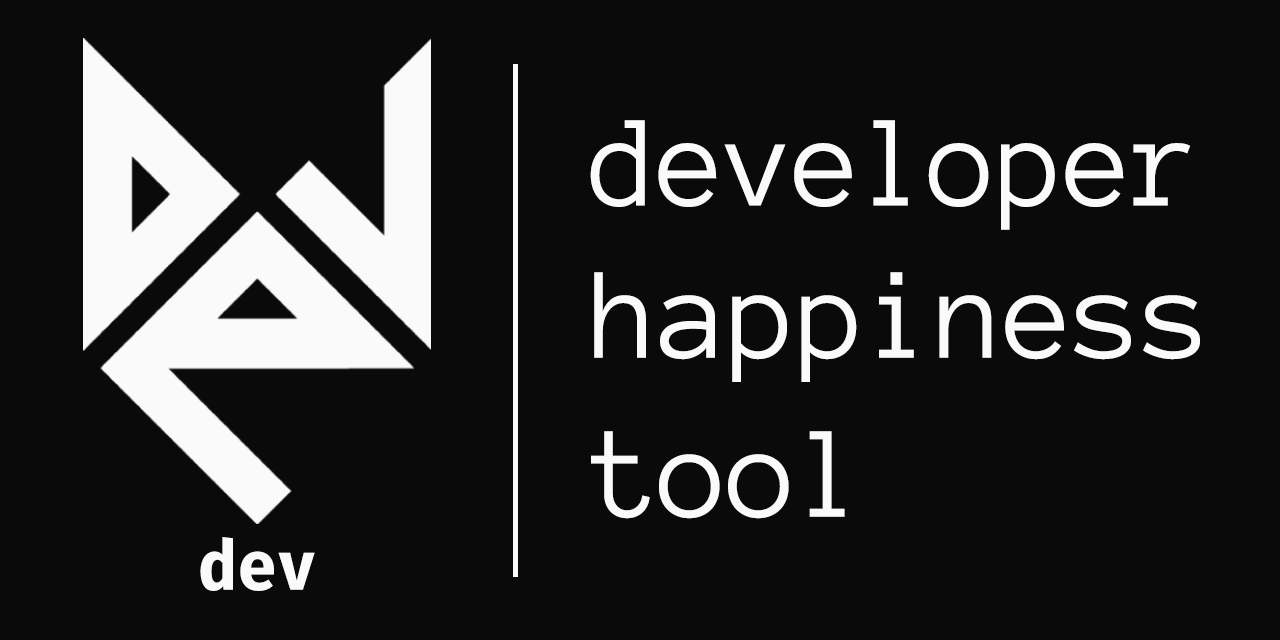
<style>
.page{position:relative;width:1280px;height:640px;background:#0a0a0a}
.page>*{position:absolute;margin:0}
.t1{font:133.4px "AnonymousPro";color:#fafafa;scale:0.93 1}
.t2{font:133.5px "AnonymousPro";color:#fafafa;scale:0.95 1}
.t3{font:69.1px "FiraCode-Bold";color:#fafafa;scale:0.95 1}
</style>
<div class="page">
<p class="t1" style="left:590px;top:120px;width:600px;height:110px">developer</p>
<p class="t2" style="left:594px;top:272px;width:606px;height:110px">happiness</p>
<p class="t2" style="left:591px;top:431px;width:254px;height:88px">tool</p>
<p class="t3" style="left:200px;top:537px;width:115px;height:54px">dev</p>
</div>
